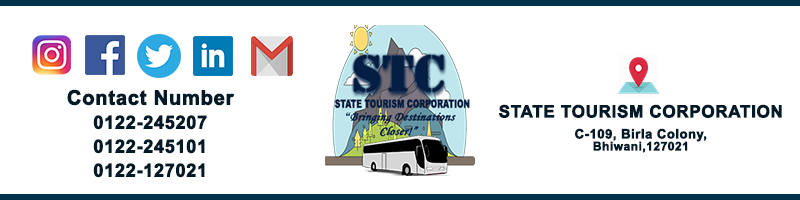
<style>
.page{position:relative;width:800px;height:200px;background:#ffffff}
.page>*{position:absolute;margin:0}
.t1{font:18px/24px "Arial-BoldMT";letter-spacing:0.015em;color:#021a27;font-weight:bold}
.t2{font:20px/24px "Arial-BoldMT";letter-spacing:0.015em;color:#021a27;font-weight:bold}
.t3{font:17px/10px "Arial-BoldMT";letter-spacing:0.015em;color:#021a27;font-weight:bold}
.t4{font:17px "Arial-BoldMT";letter-spacing:0.015em;color:#021a27;font-weight:bold}
.t5{font:13px/11px "Arial-BoldMT";letter-spacing:0.015em;color:#021a27;font-weight:bold}
.t6{font:12px/12px "Arial-BoldMT";letter-spacing:0.015em;color:#021a27;font-weight:bold}
</style>
<div class="page">
<p class="t1" style="left:67px;top:89px;width:168px;height:89px;text-align:center"><span class="t2">Contact Number<br></span>0122-245207<br>0122-245101<br>0122-127021</p>
<p class="t3" style="left:499px;top:104px;width:283px;height:49px;text-align:center"><span class="t4">S</span>TATE TOURISM CORPORATION<br><br><span class="t5">C-109, Birla Colony, <br></span><span class="t6">Bhiwani,127021</span></p>
</div>
